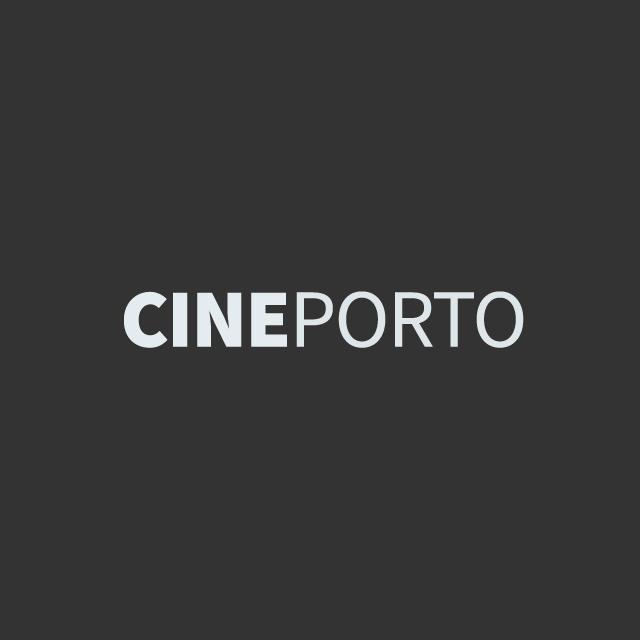
<style>
.page{position:relative;width:640px;height:640px;background:#333333}
.page>*{position:absolute;margin:0}
.t1{font:82.5px "SourceSansPro-Regular";letter-spacing:-0.02em;color:#dfe6e9;text-transform:uppercase}
.t2{font:82.5px "SourceSansPro-Black";letter-spacing:-0.02em;color:#e4ecf0;text-transform:uppercase}
</style>
<div class="page">
<p class="t1" style="left:124px;top:291px;width:400px;height:57px"><span class="t2">CINE</span>PORTO</p>
</div>
